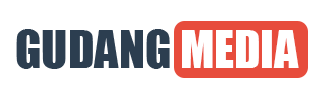
<style>
.page{position:relative;width:327px;height:100px;background:#ffffff}
.page>*{position:absolute;margin:0}
.t1{font:48px "Impact";color:#2c3e50}
.t2{font:48px "Impact";color:#ffffff}
</style>
<div class="page">
<p class="t1" style="left:16px;top:29px;width:283px;height:40px">GUDANG <span class="t2">MEDIA</span></p>
</div>
